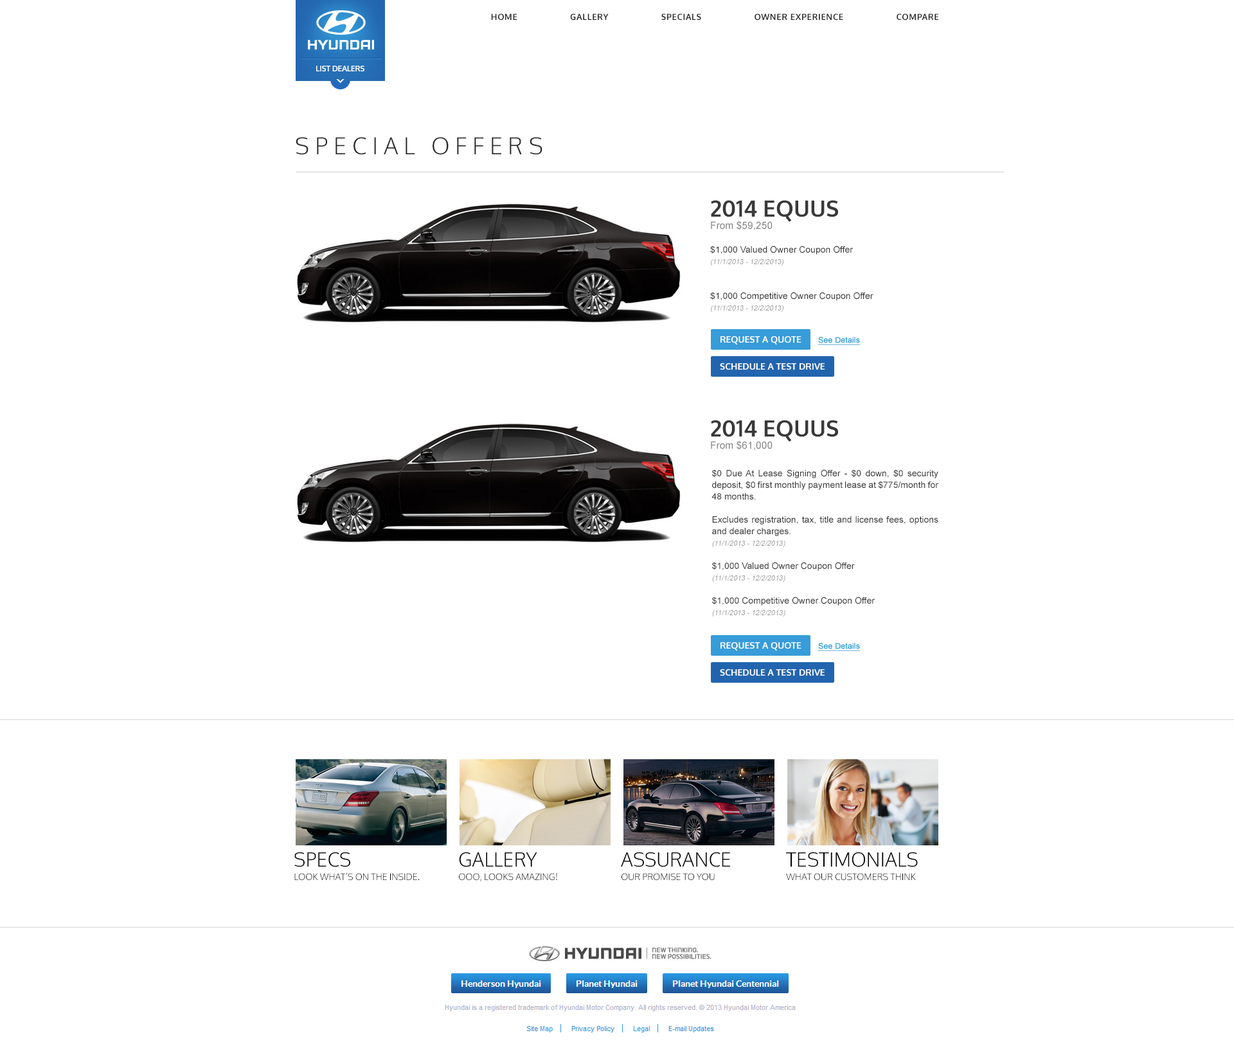
<style>
.page{position:relative;width:1234px;height:1044px;background:#ffffff}
.page>*{position:absolute;margin:0}
.t1{font:8.4px "Oxygen-Bold";letter-spacing:0.05em;color:#282828;text-transform:uppercase}
.t2{font:7.8px "Oxygen-Bold";letter-spacing:-0.025em;color:#ffffff;text-transform:uppercase}
.t3{font:23.1px "Oxygen-Light";letter-spacing:0.242em;color:#282828;text-transform:uppercase}
.t4{font:9px/11.6px "ArialMT";color:#393939}
.t5{font:22.5px "Oxygen-Bold";color:#393939;text-transform:uppercase}
.t6{font:10px "ArialMT";color:#868686}
.t7{font:7.1px/11.6px "ArialMT";color:#9d9d9d;font-style:italic}
.t8{font:9px "Oxygen-Bold";color:#ffffff;text-transform:uppercase}
.t9{font:7.7px "ArialMT";color:#33a3d7;font-weight:bold;text-decoration:underline}
.t10{font:19.3px "Oxygen-Light";color:#000000;text-transform:uppercase}
.t11{font:9px "Oxygen-Light";color:#000000;text-transform:uppercase}
</style>
<div class="page">
<p class="t1" style="left:491px;top:14px;width:448px;height:7px">Home                    gallery                    Specials                    Owner Experience                    Compare</p>
<p class="t2" style="left:316px;top:66px;width:48px;height:6px">List Dealers</p>
<p class="t3" style="left:296px;top:137px;width:247px;height:18px">Special Offers</p>
<p class="t4" style="left:710px;top:200px;width:164px;height:112px;text-align:justify"><span class="t5">2014 Equus<br></span><span class="t6">From $59,250<br><br></span>$1,000 Valued Owner Coupon Offer<br><span class="t7">(11/1/2013 - 12/2/2013)<br></span><br><br>$1,000 Competitive Owner Coupon Offer<br><span class="t7">(11/1/2013 - 12/2/2013)</span></p>
<p class="t8" style="left:721px;top:336px;width:81px;height:9px">Request A Quote</p>
<p class="t9" style="left:818px;top:337px;width:42px;height:8px">See Details</p>
<p class="t8" style="left:720px;top:363px;width:105px;height:7px">Schedule A Test Drive</p>
<p class="t6" style="left:711px;top:420px;width:127px;height:31px;text-align:justify"><span class="t5">2014 Equus<br></span>From $61,000</p>
<p class="t4" style="left:712px;top:469px;width:227px;height:148px;text-align:justify">$0 Due At Lease Signing Offer - $0 down, $0 security deposit, $0 first monthly payment lease at $775/month for 48 months. <br><br>Excludes registration, tax, title and license fees, options and dealer charges. <br><span class="t7">(11/1/2013 - 12/2/2013)<br></span><br>$1,000 Valued Owner Coupon Offer<br><span class="t7">(11/1/2013 - 12/2/2013)<br></span><br>$1,000 Competitive Owner Coupon Offer<br><span class="t7">(11/1/2013 - 12/2/2013)</span></p>
<p class="t8" style="left:721px;top:642px;width:81px;height:9px">Request A Quote</p>
<p class="t9" style="left:818px;top:643px;width:42px;height:8px">See Details</p>
<p class="t8" style="left:720px;top:669px;width:105px;height:7px">Schedule A Test Drive</p>
<p class="t10" style="left:294px;top:852px;width:56px;height:15px">Specs</p>
<p class="t10" style="left:459px;top:852px;width:78px;height:15px">Gallery</p>
<p class="t10" style="left:621px;top:852px;width:109px;height:15px">Assurance</p>
<p class="t10" style="left:786px;top:852px;width:132px;height:15px">Testimonials</p>
<p class="t11" style="left:294px;top:872px;width:126px;height:9px">look what’s on the inside.</p>
<p class="t11" style="left:459px;top:873px;width:98px;height:8px">Ooo, looks amazing!</p>
<p class="t11" style="left:622px;top:873px;width:93px;height:8px">Our promise to you</p>
<p class="t11" style="left:786px;top:873px;width:130px;height:8px">what our customers think</p>
</div>
